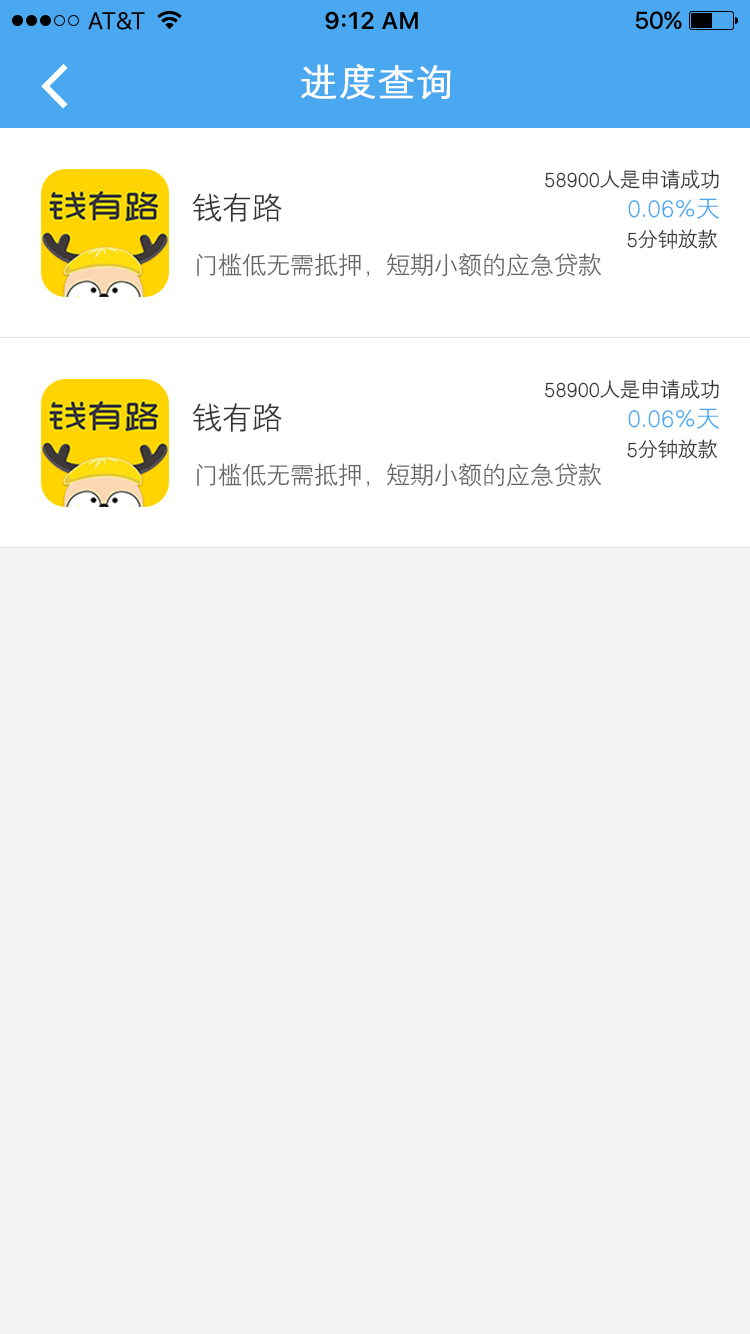
<style>
.page{position:relative;width:750px;height:1334px;background:#f3f3f3}
.page>*{position:absolute;margin:0}
.t1{font:36px "HYZhongJianHeiJ";letter-spacing:0.05em;color:#ffffff;font-weight:bold}
.t2{font:20px "HYZhongJianHeiJ";color:#333333}
.t3{font:30px "HYZhongJianHeiJ";color:#333333}
.t4{font:24px "HYZhongJianHeiJ";color:#49a8ef}
.t5{font:24px "HYZhongJianHeiJ";color:#666666}
</style>
<div class="page">
<p class="t1" style="left:301px;top:64px;width:150px;height:36px">进度查询</p>
<p class="t2" style="left:545px;top:169px;width:174px;height:20px">58900人是申请成功</p>
<p class="t3" style="left:192px;top:193px;width:90px;height:29px">钱有路</p>
<p class="t4" style="left:628px;top:198px;width:92px;height:21px">0.06%天</p>
<p class="t2" style="left:627px;top:229px;width:91px;height:20px">5分钟放款</p>
<p class="t5" style="left:197px;top:253px;width:405px;height:24px">门槛低无需抵押，短期小额的应急贷款</p>
<p class="t2" style="left:545px;top:379px;width:174px;height:20px">58900人是申请成功</p>
<p class="t3" style="left:192px;top:403px;width:90px;height:29px">钱有路</p>
<p class="t4" style="left:628px;top:408px;width:92px;height:21px">0.06%天</p>
<p class="t2" style="left:627px;top:439px;width:91px;height:20px">5分钟放款</p>
<p class="t5" style="left:197px;top:463px;width:405px;height:24px">门槛低无需抵押，短期小额的应急贷款</p>
</div>
